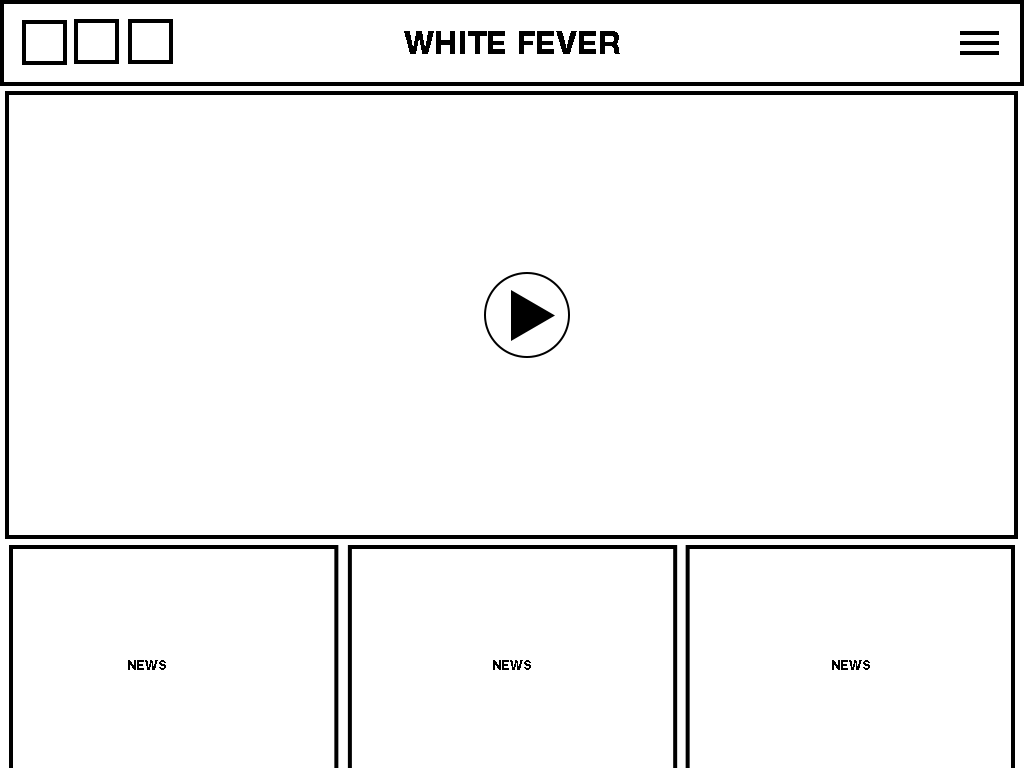
<style>
.page{position:relative;width:1024px;height:768px;background:#ffffff}
.page>*{position:absolute;margin:0}
.t1{font:31.2px "HelveticaNeue-Heavy";color:#000000}
.t2{font:13px "HelveticaNeue-Heavy";color:#000000}
</style>
<div class="page">
<p class="t1" style="left:404px;top:31px;width:216px;height:23px">WHITE FEVER</p>
<p class="t2" style="left:128px;top:660px;width:38px;height:10px">NEWS</p>
<p class="t2" style="left:493px;top:660px;width:38px;height:10px">NEWS</p>
<p class="t2" style="left:832px;top:660px;width:38px;height:10px">NEWS</p>
</div>
